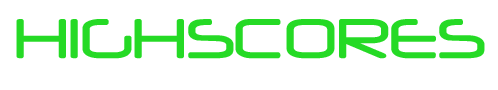
<style>
.page{position:relative;width:498px;height:90px;background:#ffffff}
.page>*{position:absolute;margin:0}
.t1{font:66px "Neuropol";color:#25da25}
</style>
<div class="page">
<p class="t1" style="left:16px;top:19px;width:469px;height:40px">HIGHSCORES</p>
</div>
